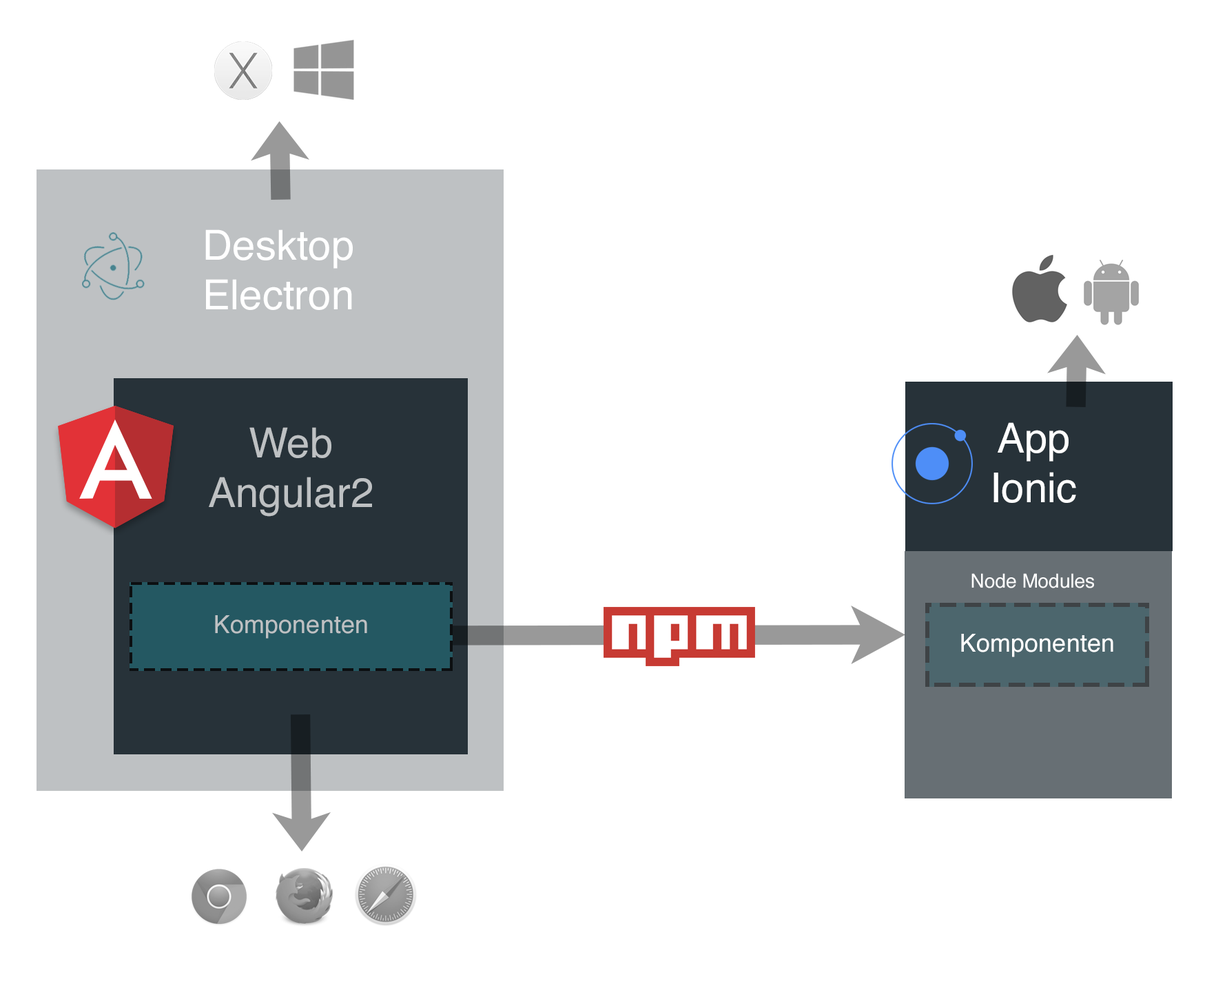
<style>
.page{position:relative;width:1216px;height:981px;background:#ffffff}
.page>*{position:absolute;margin:0}
.t1{font:41.3px "Helvetica";color:#ffffff}
.t2{font:41.3px "Helvetica";color:#bec1c3}
.t3{font:19.3px "Helvetica";color:#ffffff}
.t4{font:24.8px "Helvetica";color:#bec1c3}
.t5{font:24.8px "Helvetica";color:#ffffff}
</style>
<div class="page">
<p class="t1" style="left:205px;top:229px;width:148px;height:81px;text-align:center">Desktop<br>Electron</p>
<p class="t1" style="left:993px;top:422px;width:83px;height:81px;text-align:center">App<br>Ionic</p>
<p class="t2" style="left:209px;top:427px;width:163px;height:90px;text-align:center">Web<br>Angular2</p>
<p class="t3" style="left:971px;top:573px;width:123px;height:15px">Node Modules</p>
<p class="t4" style="left:215px;top:615px;width:152px;height:24px">Komponenten</p>
<p class="t5" style="left:961px;top:634px;width:152px;height:23px">Komponenten</p>
</div>
